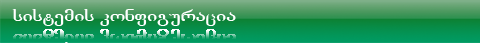
<style>
.page{position:relative;width:480px;height:43px}
.page>*{position:absolute;margin:0}
.t1{font:18px "GeoTimes";color:#ffffff;scale:1.2 1}
</style>
<div class="page">
<p class="t1" style="left:12px;top:9px;width:224px;height:17px">ÓÉÓÔÄÌÉÓ ÊÏÍ×ÉÂÖÒÀÝÉÀ</p>
</div>
